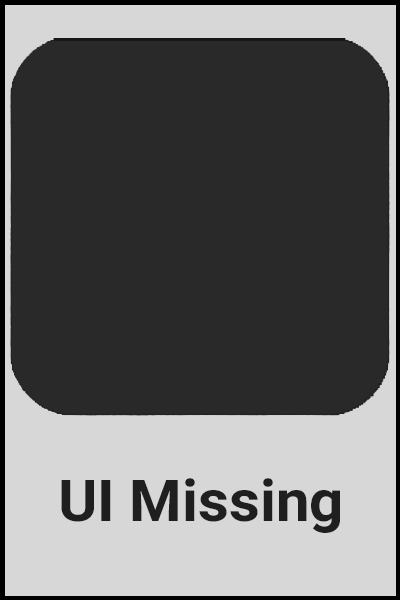
<style>
.page{position:relative;width:400px;height:600px;background:#292929}
.page>*{position:absolute;margin:0}
.t1{font:57.8px "Roboto-Bold";color:#1f1f1f;scale:1.04 1}
</style>
<div class="page">
<p class="t1" style="left:61px;top:478px;width:279px;height:55px">UI Missing</p>
</div>
